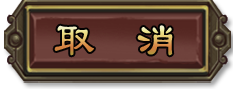
<style>
.page{position:relative;width:233px;height:89px}
.page>*{position:absolute;margin:0}
.t1{font:49.1px "LiSu";scale:0.85 1}
</style>
<div class="page">
<p class="t1" style="left:54px;top:25px;width:119px;height:31px">取  消</p>
</div>
